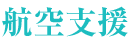
<style>
.page{position:relative;width:129px;height:43px;background:#ffffff}
.page>*{position:absolute;margin:0}
.t1{font:32px "RyuminPro-ExBold";color:#1dbdc0}
</style>
<div class="page">
<p class="t1" style="left:2px;top:6px;width:126px;height:31px">航空支援</p>
</div>
